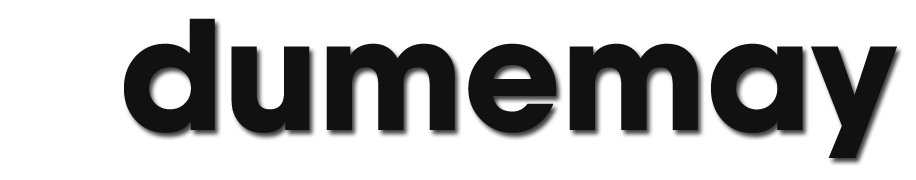
<style>
.page{position:relative;width:916px;height:180px;background:#ffffff}
.page>*{position:absolute;margin:0}
.t1{font:150px "UTMAvoBold";color:#111111}
</style>
<div class="page">
<p class="t1" style="left:124px;top:18px;width:773px;height:140px">dumemay</p>
</div>
